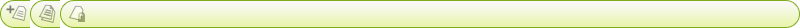
<style>
.page{position:relative;width:800px;height:28px}
.page>*{position:absolute;margin:0}
.t1{font:18px "TrebuchetMS-Bold";color:#7a7c71}
</style>
<div class="page">
<p class="t1" style="left:6px;top:5px;width:9px;height:9px">+</p>
</div>
